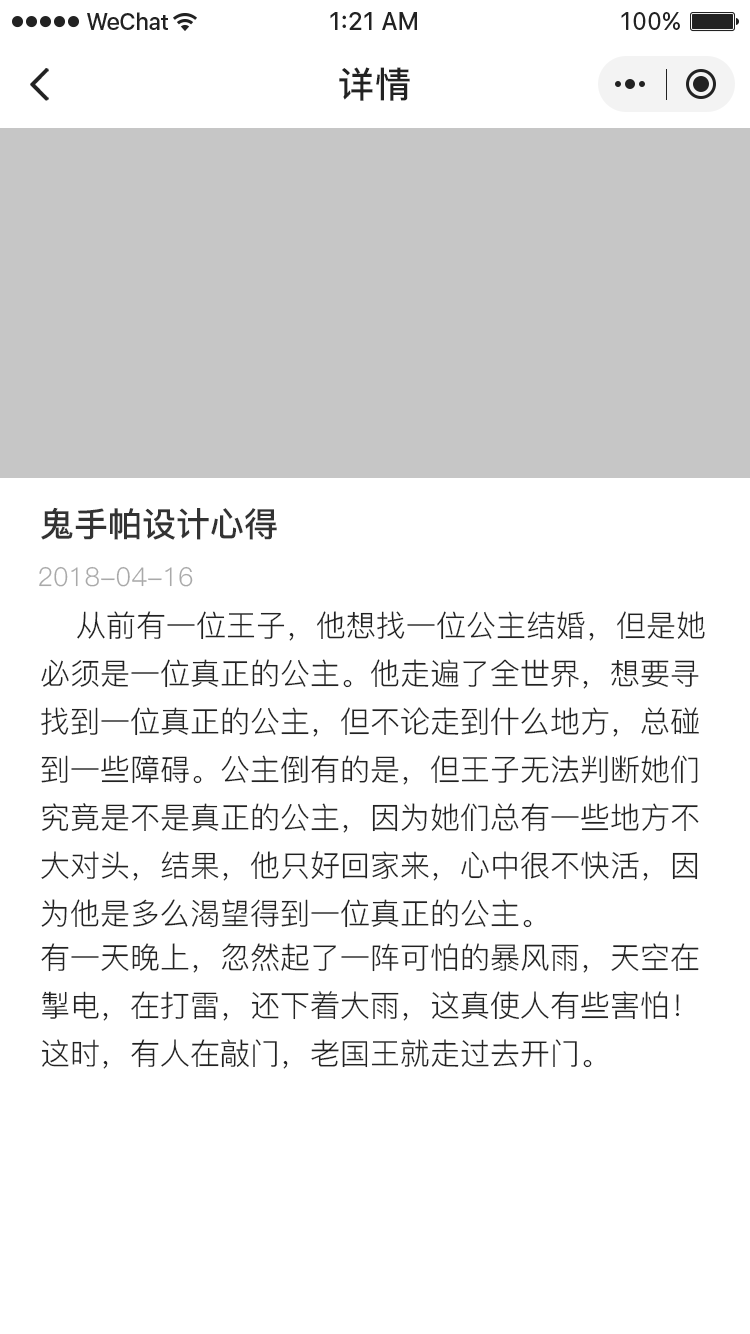
<style>
.page{position:relative;width:750px;height:1334px;background:#ffffff}
.page>*{position:absolute;margin:0}
.t1{font:36px "PingFang-SC-Bold";letter-spacing:0.028em;color:#222222}
.t2{font:34px "PingFang-SC-Bold";color:#333333}
.t3{font:26px "PingFang-SC-Regular";color:#a9a9a9}
.t4{font:30px/48px "PingFang-SC-Regular";color:#222222}
</style>
<div class="page">
<p class="t1" style="left:339px;top:67px;width:71px;height:34px">详情</p>
<p class="t2" style="left:41px;top:507px;width:236px;height:33px">鬼手帕设计心得</p>
<p class="t3" style="left:39px;top:566px;width:154px;height:21px">2018-04-16</p>
<p class="t4" style="left:41px;top:611px;width:664px;height:458px">从前有一位王子，他想找一位公主结婚，但是她必须是一位真正的公主。他走遍了全世界，想要寻找到一位真正的公主，但不论走到什么地方，总碰到一些障碍。公主倒有的是，但王子无法判断她们究竟是不是真正的公主，因为她们总有一些地方不大对头，结果，他只好回家来，心中很不快活，因为他是多么渴望得到一位真正的公主。<br>有一天晚上，忽然起了一阵可怕的暴风雨，天空在掣电，在打雷，还下着大雨，这真使人有些害怕！这时，有人在敲门，老国王就走过去开门。</p>
</div>
